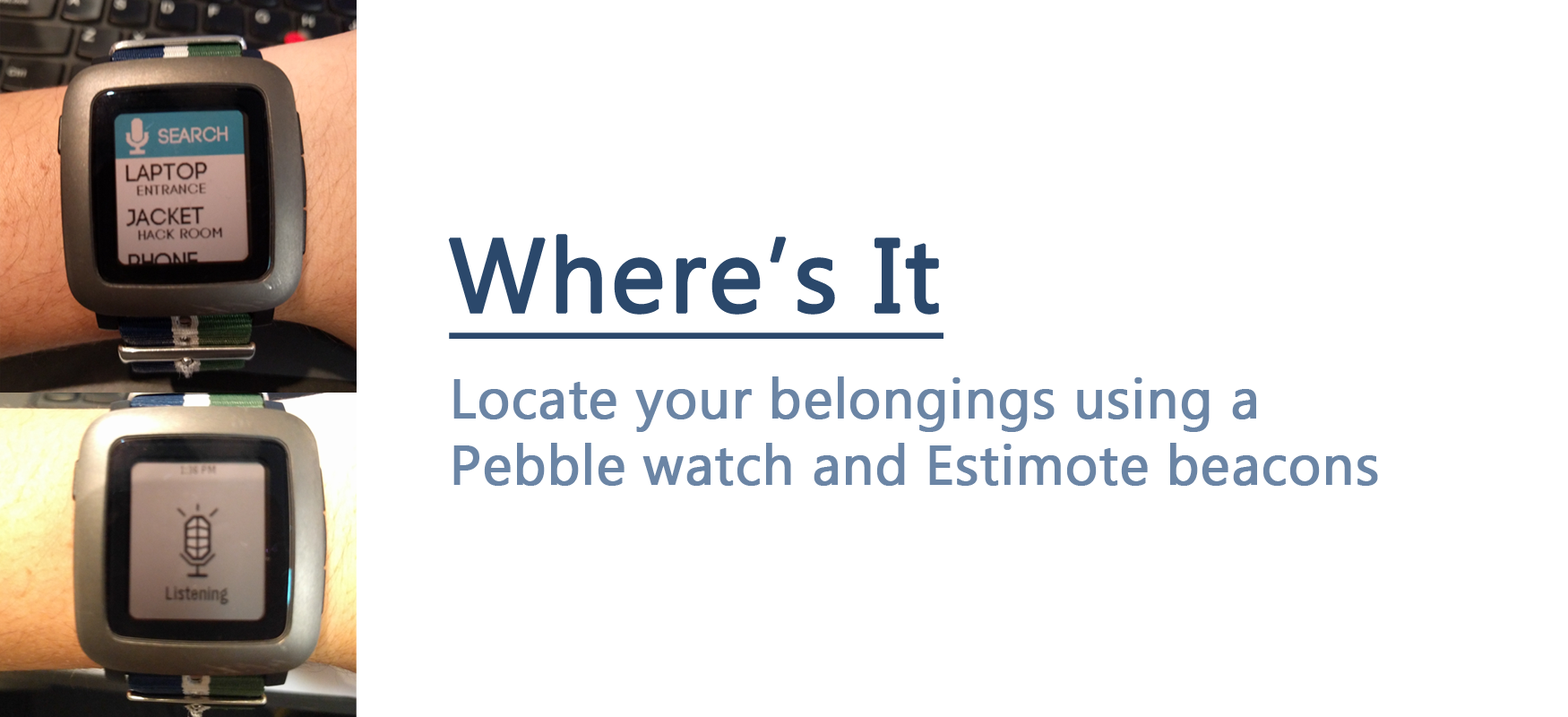
<style>
.page{position:relative;width:1568px;height:717px;background:#ffffff}
.page>*{position:absolute;margin:0}
.t1{font:103px "MicrosoftNewTaiLue";letter-spacing:0.01em;color:#2b486b;font-weight:bold;text-decoration:underline}
.t2{font:55.6px "MicrosoftNewTaiLue";color:#6b85a5;font-weight:bold}
</style>
<div class="page">
<p class="t1" style="left:448px;top:234px;width:495px;height:105px">Where’s It</p>
<p class="t2" style="left:453px;top:376px;width:925px;height:110px">Locate your belongings using a<br>Pebble watch and Estimote beacons</p>
</div>
